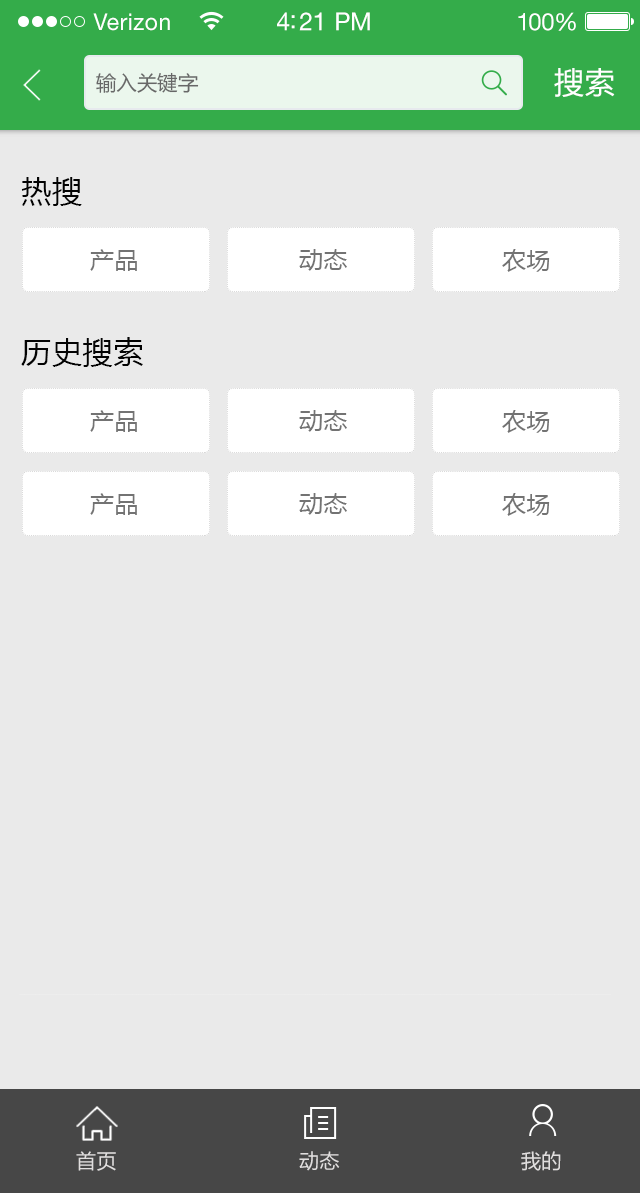
<style>
.page{position:relative;width:640px;height:1193px;background:#eaeaea}
.page>*{position:absolute;margin:0}
.t1{font:23px "HelveticaNeueLTStd-Roman";letter-spacing:0.02em;color:#ffffff}
.t2{font:25px "HelveticaNeueLTStd-Roman";letter-spacing:-0.02em;color:#ffffff}
.t3{font:24px "HelveticaNeueLTStd-Roman";letter-spacing:-0.02em;color:#ffffff}
.t4{font:20.3px "MicrosoftYaHei";color:#676767}
.t5{font:30px "MicrosoftYaHei";letter-spacing:0.025em;color:#ffffff}
.t6{font:30px "MicrosoftYaHei";letter-spacing:0.025em;color:#030303}
.t7{font:24px "MicrosoftYaHei";letter-spacing:0.025em;color:#737373}
.t8{font:20px "MicrosoftYaHei";letter-spacing:0.025em;color:#e0dede}
</style>
<div class="page">
<p class="t1" style="left:93px;top:13px;width:77px;height:18px">Verizon</p>
<p class="t2" style="left:277px;top:12px;width:93px;height:19px">4:21 PM</p>
<p class="t3" style="left:518px;top:12px;width:58px;height:19px">100%</p>
<p class="t4" style="left:96px;top:72px;width:103px;height:21px">输入关键字</p>
<p class="t5" style="left:554px;top:68px;width:61px;height:29px">搜索</p>
<p class="t6" style="left:21px;top:177px;width:61px;height:29px">热搜</p>
<p class="t7" style="left:90px;top:249px;width:47px;height:22px">产品</p>
<p class="t7" style="left:299px;top:249px;width:48px;height:22px">动态</p>
<p class="t7" style="left:502px;top:249px;width:48px;height:23px">农场</p>
<p class="t6" style="left:21px;top:337px;width:122px;height:30px">历史搜索</p>
<p class="t7" style="left:90px;top:410px;width:47px;height:22px">产品</p>
<p class="t7" style="left:299px;top:410px;width:48px;height:22px">动态</p>
<p class="t7" style="left:502px;top:410px;width:48px;height:23px">农场</p>
<p class="t7" style="left:90px;top:493px;width:47px;height:22px">产品</p>
<p class="t7" style="left:299px;top:493px;width:48px;height:22px">动态</p>
<p class="t7" style="left:502px;top:493px;width:48px;height:23px">农场</p>
<p class="t8" style="left:76px;top:1151px;width:40px;height:20px">首页</p>
<p class="t8" style="left:299px;top:1151px;width:41px;height:20px">动态</p>
<p class="t8" style="left:521px;top:1151px;width:40px;height:20px">我的</p>
</div>
